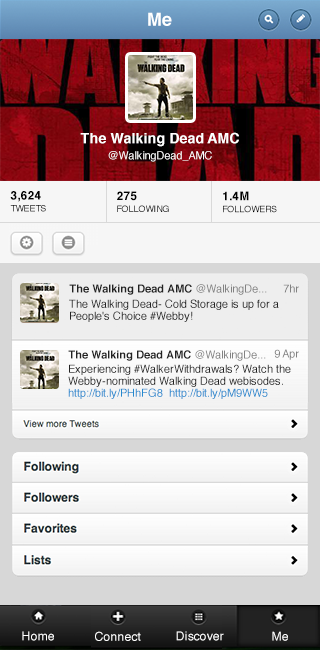
<style>
.page{position:relative;width:320px;height:650px}
.page>*{position:absolute;margin:0}
.t1{font:18px "Helvetica-Bold";color:#ffffff}
.t2{font:14px/16px "Helvetica-Bold";color:#ffffff}
.t3{font:11px/16px "Helvetica";color:#ffffff}
.t4{font:9px/12px "Helvetica";color:#000000}
.t5{font:12px/12px "Helvetica-Bold";color:#000000}
.t6{font:11px "Helvetica-Bold";color:#222222}
.t7{font:11px "Helvetica";color:#818181}
.t8{font:11px/12px "Helvetica";color:#222222}
.t9{font:11px/12px "Helvetica";color:#2489ce}
.t10{font:12px "Helvetica";color:#ffffff}
</style>
<div class="page">
<p class="t1" style="left:148px;top:12px;width:24px;height:14px">Me</p>
<p class="t2" style="left:80px;top:132px;width:159px;height:30px;text-align:center">The Walking Dead AMC<br><span class="t3">@WalkingDead_AMC</span></p>
<p class="t4" style="left:10px;top:191px;width:36px;height:21px"><span class="t5">3,624<br></span>TWEETS</p>
<p class="t4" style="left:117px;top:191px;width:52px;height:21px"><span class="t5">275<br></span>FOLLOWING</p>
<p class="t4" style="left:223px;top:191px;width:54px;height:22px"><span class="t5">1.4M<br></span>FOLLOWERS</p>
<p class="t6" style="left:69px;top:284px;width:198px;height:11px">The Walking Dead AMC ‏<span class="t7">@WalkingDe...</span></p>
<p class="t7" style="left:283px;top:284px;width:16px;height:9px">7hr</p>
<p class="t8" style="left:69px;top:299px;width:210px;height:23px">The Walking Dead- Cold Storage is up for a People's Choice #Webby!</p>
<p class="t6" style="left:68px;top:350px;width:198px;height:11px">The Walking Dead AMC ‏<span class="t7">@WalkingDe...</span></p>
<p class="t7" style="left:274px;top:349px;width:25px;height:11px">9 Apr</p>
<p class="t8" style="left:68px;top:364px;width:223px;height:35px">Experiencing #WalkerWithdrawals? Watch the Webby-nominated Walking Dead webisodes. <span class="t9">http://bit.ly/PHhFG8  http://bit.ly/pM9WW5</span></p>
<p class="t10" style="left:22px;top:631px;width:32px;height:10px">Home</p>
<p class="t10" style="left:95px;top:631px;width:46px;height:10px">Connect</p>
<p class="t10" style="left:176px;top:631px;width:48px;height:10px">Discover</p>
<p class="t10" style="left:272px;top:631px;width:16px;height:10px">Me</p>
</div>
